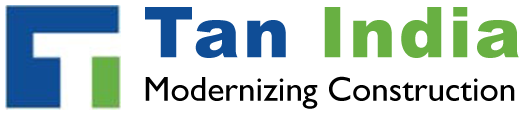
<style>
.page{position:relative;width:520px;height:115px;background:#ffffff}
.page>*{position:absolute;margin:0}
.t1{font:70.2px "Arial-Black";letter-spacing:0.04em;color:#68b042}
.t2{font:70.2px "Arial-Black";letter-spacing:0.04em;color:#0f4d96}
.t3{font:34.9px "GillSansMT";color:#000000}
</style>
<div class="page">
<p class="t1" style="left:145px;top:7px;width:374px;height:51px"><span class="t2">Tan </span>India</p>
<p class="t3" style="left:145px;top:76px;width:370px;height:33px">Modernizing Construction</p>
</div>
